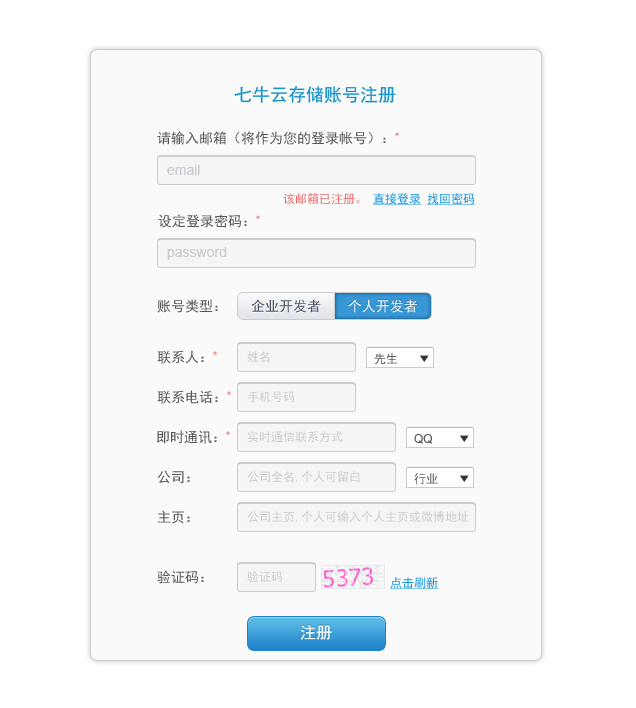
<style>
.page{position:relative;width:636px;height:708px;background:#fafafa}
.page>*{position:absolute;margin:0}
.t1{font:18px "SimHei";color:#1693c9}
.t2{font:14px "SimHei";color:#585858}
.t3{font:14px "SimHei";color:#e96a6a}
.t4{font:14px "ArialMT";color:#c9ccd0}
.t5{font:12px "SimHei";color:#0c94de;text-decoration:underline}
.t6{font:12px "SimHei";color:#e96a6a}
.t7{font:14px "SimHei";color:#465567}
.t8{font:14px "SimHei";color:#fefefe}
.t9{font:12px "SimHei";color:#c9ccd0}
.t10{font:12px "SimHei";color:#585858}
.t11{font:12px "ArialMT";color:#585858}
.t12{font:16px "SimHei";color:#ffffff}
</style>
<div class="page">
<p class="t1" style="left:234px;top:86px;width:162px;height:17px">七牛云存储账号注册</p>
<p class="t2" style="left:157px;top:131px;width:242px;height:14px">请输入邮箱（将作为您的登录帐号）：<span class="t3">*</span></p>
<p class="t4" style="left:167px;top:165px;width:33px;height:10px">email</p>
<p class="t5" style="left:283px;top:193px;width:193px;height:12px"><span class="t6">该邮箱已注册。 </span>直接登录 找回密码</p>
<p class="t2" style="left:158px;top:214px;width:102px;height:14px">设定登录密码：<span class="t3">*</span></p>
<p class="t4" style="left:167px;top:247px;width:60px;height:13px">password</p>
<p class="t2" style="left:157px;top:299px;width:61px;height:14px">账号类型：</p>
<p class="t7" style="left:251px;top:299px;width:70px;height:14px">企业开发者</p>
<p class="t8" style="left:348px;top:299px;width:69px;height:14px">个人开发者</p>
<p class="t2" style="left:157px;top:350px;width:60px;height:14px">联系人：<span class="t3">*</span></p>
<p class="t9" style="left:247px;top:351px;width:23px;height:12px">姓名</p>
<p class="t10" style="left:374px;top:353px;width:23px;height:12px">先生</p>
<p class="t2" style="left:157px;top:390px;width:74px;height:14px">联系电话：<span class="t3">*</span></p>
<p class="t9" style="left:247px;top:391px;width:48px;height:12px">手机号码</p>
<p class="t2" style="left:157px;top:430px;width:73px;height:14px">即时通讯：<span class="t3">*</span></p>
<p class="t9" style="left:247px;top:431px;width:96px;height:12px">实时通信联系方式</p>
<p class="t11" style="left:414px;top:434px;width:19px;height:10px">QQ</p>
<p class="t2" style="left:157px;top:470px;width:33px;height:14px">公司：</p>
<p class="t9" style="left:247px;top:471px;width:113px;height:12px">公司全名,个人可留白</p>
<p class="t10" style="left:414px;top:473px;width:24px;height:12px">行业</p>
<p class="t2" style="left:157px;top:510px;width:33px;height:14px">主页：</p>
<p class="t9" style="left:247px;top:511px;width:222px;height:12px">公司主页,个人可输入个人主页或微博地址</p>
<p class="t2" style="left:157px;top:570px;width:47px;height:14px">验证码：</p>
<p class="t9" style="left:247px;top:571px;width:36px;height:12px">验证码</p>
<p class="t5" style="left:390px;top:577px;width:49px;height:12px">点击刷新</p>
<p class="t12" style="left:300px;top:625px;width:32px;height:15px">注册</p>
</div>
